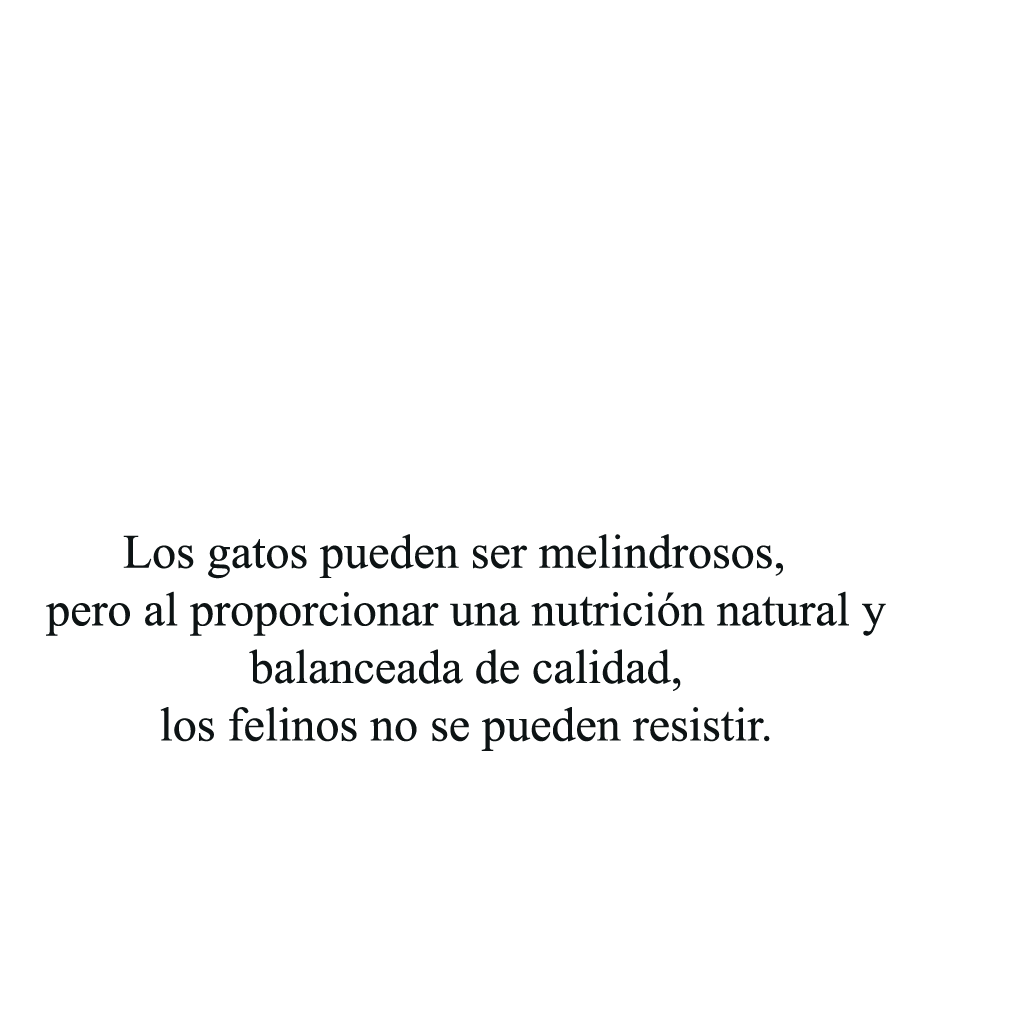
<style>
.page{position:relative;width:1024px;height:1024px;background:#ffffff}
.page>*{position:absolute;margin:0}
.t1{font:48px "TimesNewRomanPSMT";color:#0d1314}
</style>
<div class="page">
<p class="t1" style="left:46px;top:534px;width:840px;height:217px;text-align:center">Los gatos pueden ser melindrosos,  <br>pero al proporcionar una nutrición natural y<br>balanceada de calidad,<br> los felinos no se pueden resistir.</p>
</div>
